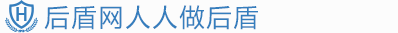
<style>
.page{position:relative;width:398px;height:33px;background:#fcfcfc}
.page>*{position:absolute;margin:0}
.t1{font:25px "MicrosoftYaHei";letter-spacing:0.08em;color:#357ebd}
</style>
<div class="page">
<p class="t1" style="left:44px;top:5px;width:214px;height:25px">后盾网人人做后盾</p>
</div>
